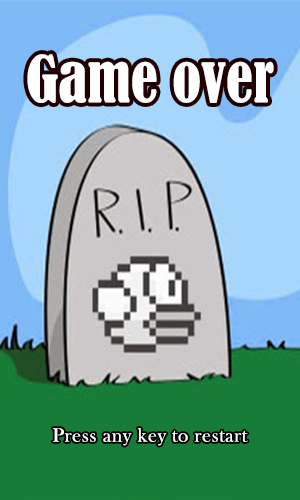
<style>
.page{position:relative;width:300px;height:500px;background:#177c38}
.page>*{position:absolute;margin:0}
.t1{font:60px "BernardMT-Condensed";color:#ffffff}
.t2{font:20px "BaskOldFace";letter-spacing:0.03em;color:#ffffff}
</style>
<div class="page">
<p class="t1" style="left:27px;top:54px;width:247px;height:49px">Game over</p>
<p class="t2" style="left:52px;top:428px;width:196px;height:18px">Press any key to restart</p>
</div>
